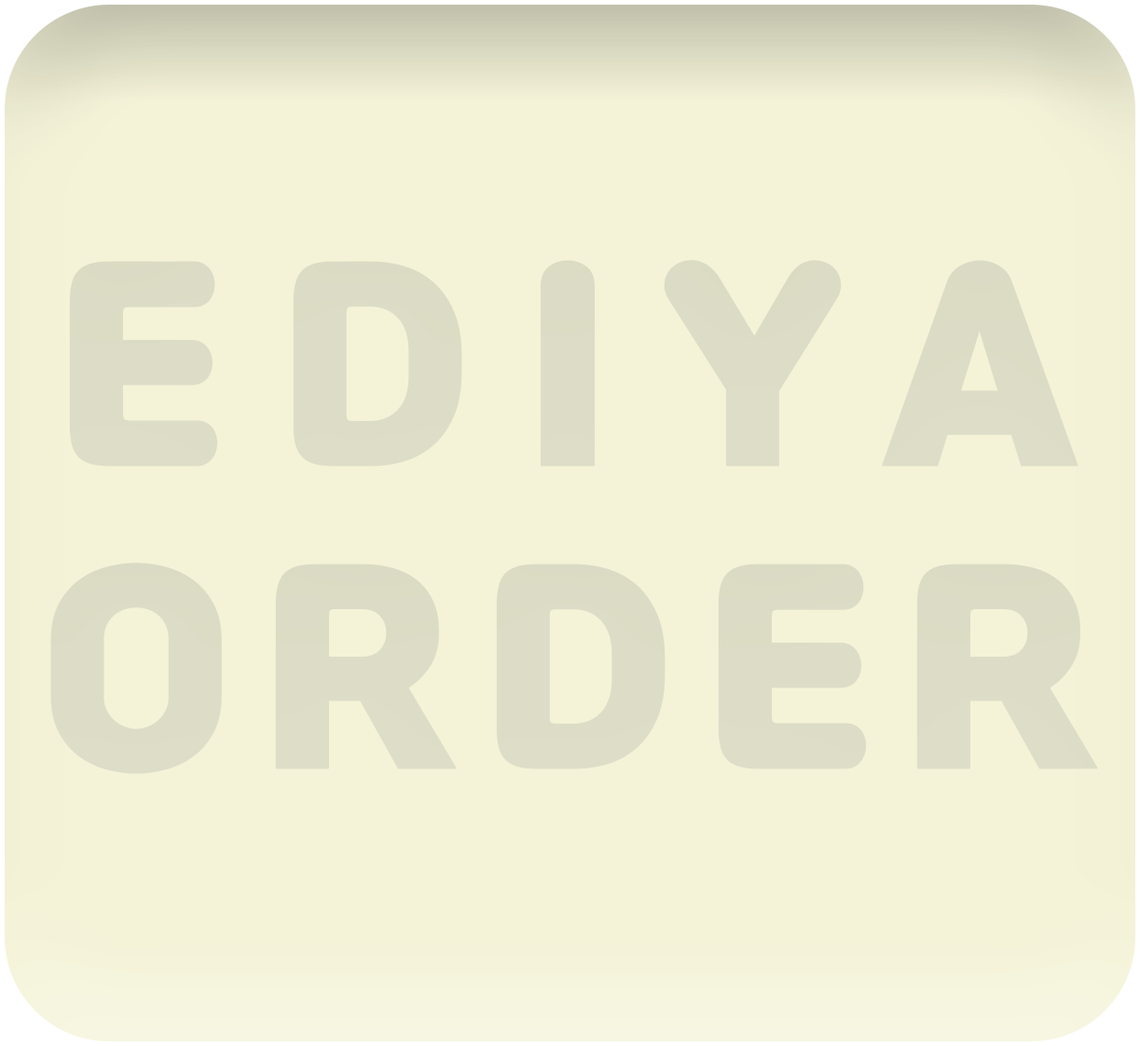
<style>
.page{position:relative;width:1140px;height:1046px;background:#f4f3d8}
.page>*{position:absolute;margin:0}
.t1{font:252.1px "Jalnan";letter-spacing:0.2em;color:#d9d8c0;font-weight:bold}
.t2{font:252.1px "Jalnan";letter-spacing:0.1em;color:#d9d8c0;font-weight:bold}
</style>
<div class="page">
<p class="t1" style="left:50px;top:260px;width:1048px;height:514px;text-align:center">EDIYA<br><span class="t2">ORDER</span></p>
</div>
